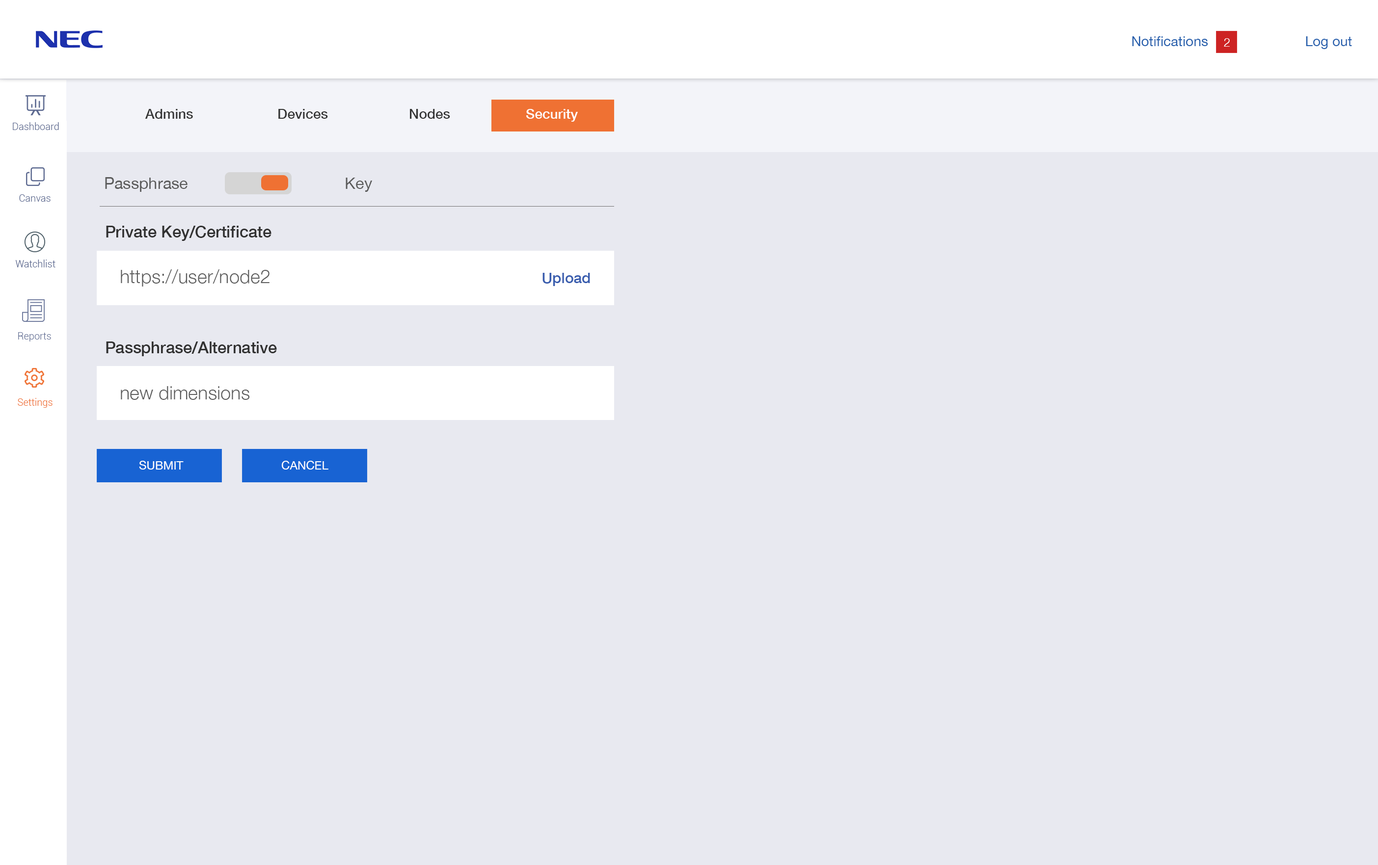
<style>
.page{position:relative;width:1378px;height:865px;background:#e8e9f0}
.page>*{position:absolute;margin:0}
.t1{font:13.7px "HelveticaNeue";color:#245eac}
.t2{font:11.8px "HelveticaNeue-Light";color:#ffffff}
.t3{font:13.7px "HelveticaNeue-Medium";color:#343434}
.t4{font:13.7px "HelveticaNeue-Medium";color:#ffffff}
.t5{font:9.8px "Roboto-Light";color:#5c6990}
.t6{font:8px/53.5px "HelveticaNeue";color:#5b5b5b}
.t7{font:16.1px "HelveticaNeue-Medium";color:#313131}
.t8{font:9.8px "Roboto-Light";color:#5b688f}
.t9{font:18.7px "HelveticaNeue-Light";color:#5d5d5d}
.t10{font:14.7px "HelveticaNeue-Medium";color:#395dae}
.t11{font:9.8px "Roboto-Light";color:#667297}
.t12{font:9.8px "Roboto-Light";color:#ef7133}
.t13{font:5.9px "HelveticaNeue";color:#ffffff}
</style>
<div class="page">
<p class="t1" style="left:1132px;top:36px;width:76px;height:10px">Notifications</p>
<p class="t2" style="left:1224px;top:38px;width:6px;height:9px">2</p>
<p class="t1" style="left:1306px;top:36px;width:46px;height:13px">Log out</p>
<p class="t3" style="left:145px;top:109px;width:48px;height:10px">Admins</p>
<p class="t3" style="left:278px;top:109px;width:50px;height:10px">Devices</p>
<p class="t3" style="left:410px;top:109px;width:40px;height:10px">Nodes</p>
<p class="t4" style="left:526px;top:109px;width:52px;height:13px">Security</p>
<p class="t5" style="left:13px;top:122px;width:46px;height:8px">Dashboard</p>
<p class="t6" style="left:105px;top:177px;width:268px;height:15px">Passphrase       Key</p>
<p class="t5" style="left:19px;top:194px;width:32px;height:8px">Canvas</p>
<p class="t7" style="left:106px;top:226px;width:165px;height:15px">Private Key/Certificate</p>
<p class="t8" style="left:15px;top:260px;width:40px;height:8px">Watchlist</p>
<p class="t9" style="left:121px;top:269px;width:148px;height:18px">https://user/node2</p>
<p class="t10" style="left:542px;top:273px;width:48px;height:13px">Upload</p>
<p class="t11" style="left:18px;top:332px;width:33px;height:10px">Reports</p>
<p class="t7" style="left:106px;top:342px;width:171px;height:14px">Passphrase/Alternative</p>
<p class="t9" style="left:121px;top:386px;width:129px;height:14px">new dimensions</p>
<p class="t12" style="left:18px;top:398px;width:35px;height:10px">Settings</p>
<p class="t13" style="left:139px;top:461px;width:45px;height:9px">SUBMIT</p>
<p class="t13" style="left:281px;top:461px;width:47px;height:9px">CANCEL</p>
</div>
